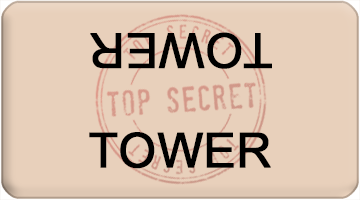
<style>
.page{position:relative;width:360px;height:200px;background:#e8d0bb}
.page>*{position:absolute;margin:0}
.t1{font:48px "ArialMT";color:#000000;font-weight:bold}
</style>
<div class="page">
<p class="t1" style="left:90px;top:32px;width:182px;height:37px;rotate:180deg">TOWER</p>
<p class="t1" style="left:89px;top:132px;width:182px;height:37px">TOWER</p>
</div>
